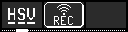
<style>
.page{position:relative;width:128px;height:32px;background:#2b2b2b}
.page>*{position:absolute;margin:0}
.t1{font:22px "PixelOperator";color:#ffffff}
.t2{font:16px "PixelOperator";color:#ffffff}
</style>
<div class="page">
<p class="t1" style="left:8px;top:7px;width:27px;height:13px">HSV</p>
<p class="t2" style="left:54px;top:16px;width:19px;height:9px">REC</p>
</div>
